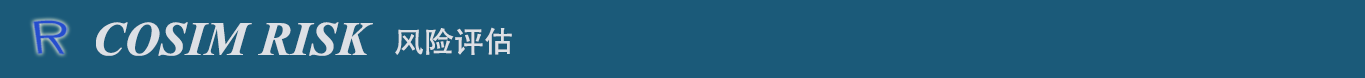
<style>
.page{position:relative;width:1365px;height:78px;background:#1b5a79}
.page>*{position:absolute;margin:0}
.t1{font:48px "TimesNewRomanPS-BoldItalicMT";color:#dde0e5}
.t2{font:29.2px "AdobeHeitiStd-Regular";color:#dde0e5}
.t3{font:29.2px "LucidaHandwriting-Italic";color:#dde0e5}
</style>
<div class="page">
<p class="t1" style="left:96px;top:22px;width:277px;height:34px">COSIM RISK</p>
<p class="t2" style="left:395px;top:27px;width:117px;height:28px"><span class="t3"> </span>风险评估</p>
</div>
